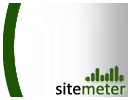
<style>
.page{position:relative;width:130px;height:100px;background:#ffffff}
.page>*{position:absolute;margin:0}
.t1{font:18px "Calibri";color:#225700}
.t2{font:18px "Calibri";color:#000000}
</style>
<div class="page">
<p class="t1" style="left:56px;top:82px;width:70px;height:13px"><span class="t2">site</span>meter</p>
</div>
